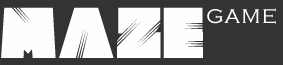
<style>
.page{position:relative;width:283px;height:65px;background:#333333}
.page>*{position:absolute;margin:0}
.t1{font:66.7px "Clutchee";letter-spacing:0.05em;color:#fefefe}
.t2{font:25px "CopperplateGothic-Light";letter-spacing:0.05em;color:#fefefe}
</style>
<div class="page">
<p class="t1" style="left:1px;top:7px;width:202px;height:51px">maze</p>
<p class="t2" style="left:207px;top:8px;width:69px;height:16px">game</p>
</div>
